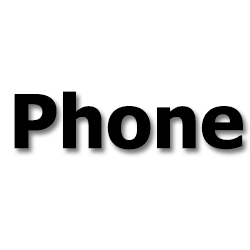
<style>
.page{position:relative;width:250px;height:250px;background:#ffffff}
.page>*{position:absolute;margin:0}
.t1{font:74.1px "Tahoma-Bold";color:#000000}
</style>
<div class="page">
<p class="t1" style="left:14px;top:91px;width:229px;height:59px">Phone</p>
</div>
